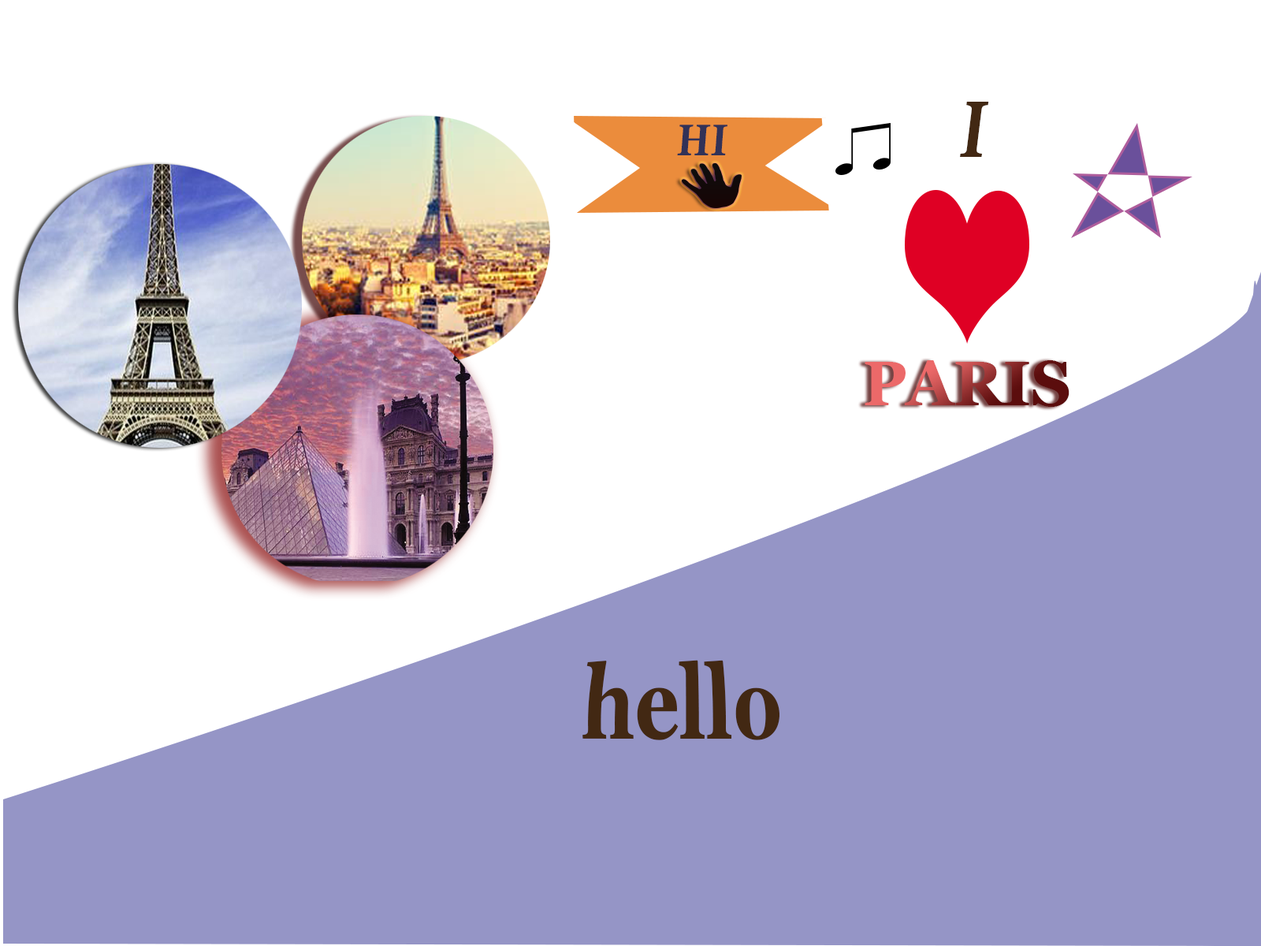
<style>
.page{position:relative;width:1261px;height:946px;background:#ffffff}
.page>*{position:absolute;margin:0}
.t1{font:136.3px "Vani-Bold";color:#422813;font-style:italic;scale:0.7 1}
.t2{font:75.8px "Vani-Bold";color:#323257;font-style:italic;scale:0.82 1}
.t3{font:62.3px "Vani-Bold"}
.t4{font:82.5px "Vani-Bold";color:#422813;scale:0.76 1}
</style>
<div class="page">
<p class="t1" style="left:960px;top:102px;width:29px;height:55px">I</p>
<p class="t2" style="left:677px;top:125px;width:50px;height:30px">HI</p>
<p class="t3" style="left:865px;top:360px;width:204px;height:47px">PARIS</p>
<p class="t4" style="left:582px;top:660px;width:197px;height:80px">hello</p>
</div>
